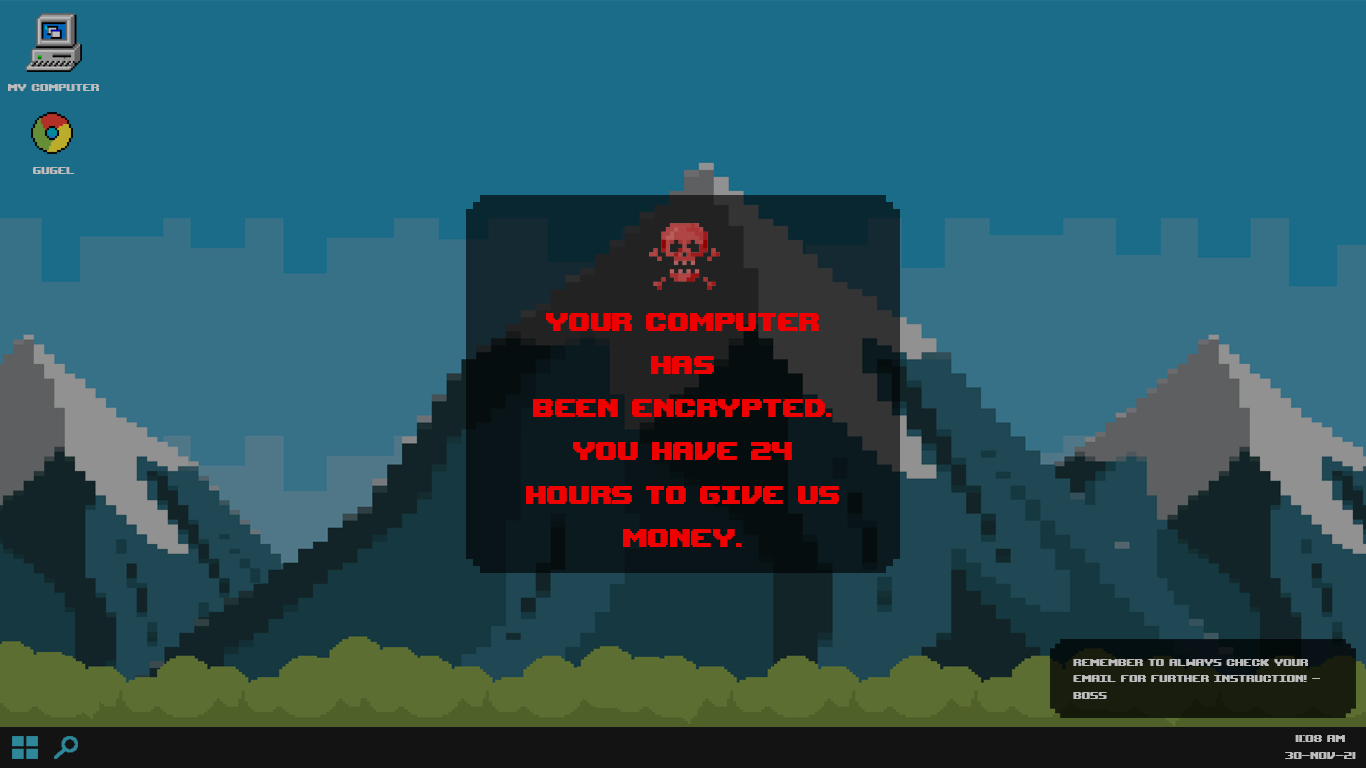
<style>
.page{position:relative;width:1366px;height:768px;background:#1a6c88}
.page>*{position:absolute;margin:0}
.t1{font:14px "UpheavalTT-BRK-";color:#bcbcbc}
.t2{font:36px "UpheavalTT-BRK-";color:#f00101}
</style>
<div class="page">
<p class="t1" style="left:8px;top:84px;width:91px;height:7px">my computer</p>
<p class="t1" style="left:33px;top:167px;width:42px;height:7px">gugel</p>
<p class="t2" style="left:526px;top:313px;width:313px;height:234px;text-align:center">your computer has<br>been encrypted. you have 24 hours to give us money.</p>
<p class="t1" style="left:1073px;top:659px;width:247px;height:40px">remember to always check your email for further instruction! - boss</p>
<p class="t1" style="left:1285px;top:735px;width:71px;height:24px;text-align:center">11:08 am<br>30-nov-21</p>
</div>
